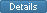
<style>
.page{position:relative;width:47px;height:13px}
.page>*{position:absolute;margin:0}
.t1{font:9px "MicrosoftSansSerif";color:#ffffff}
</style>
<div class="page">
<p class="t1" style="left:10px;top:3px;width:27px;height:7px">Details</p>
</div>
